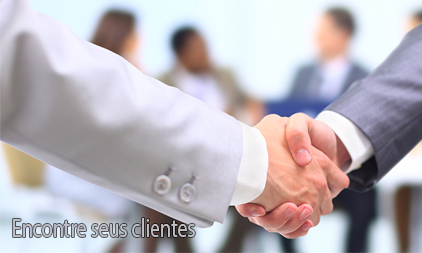
<style>
.page{position:relative;width:422px;height:253px}
.page>*{position:absolute;margin:0}
.t1{font:25.8px "MyriadPro-Regular";color:#c2c1c7;scale:0.77 1}
</style>
<div class="page">
<p class="t1" style="left:13px;top:218px;width:182px;height:19px">Encontre seus clientes</p>
</div>
